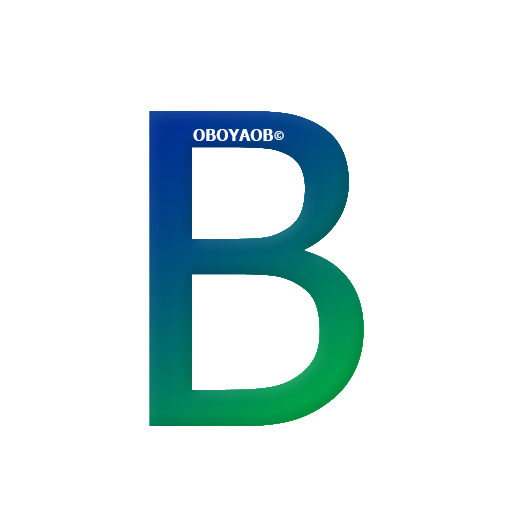
<style>
.page{position:relative;width:512px;height:512px;background:#ffffff}
.page>*{position:absolute;margin:0}
.t1{font:16px "Tahoma-Bold";color:#fdfdfd}
.t2{font:11px "Tahoma-Bold";color:#fdfdfd}
</style>
<div class="page">
<p class="t1" style="left:193px;top:129px;width:80px;height:12px">OBOYAOB</p>
<p class="t2" style="left:274px;top:131px;width:10px;height:9px">©</p>
</div>
